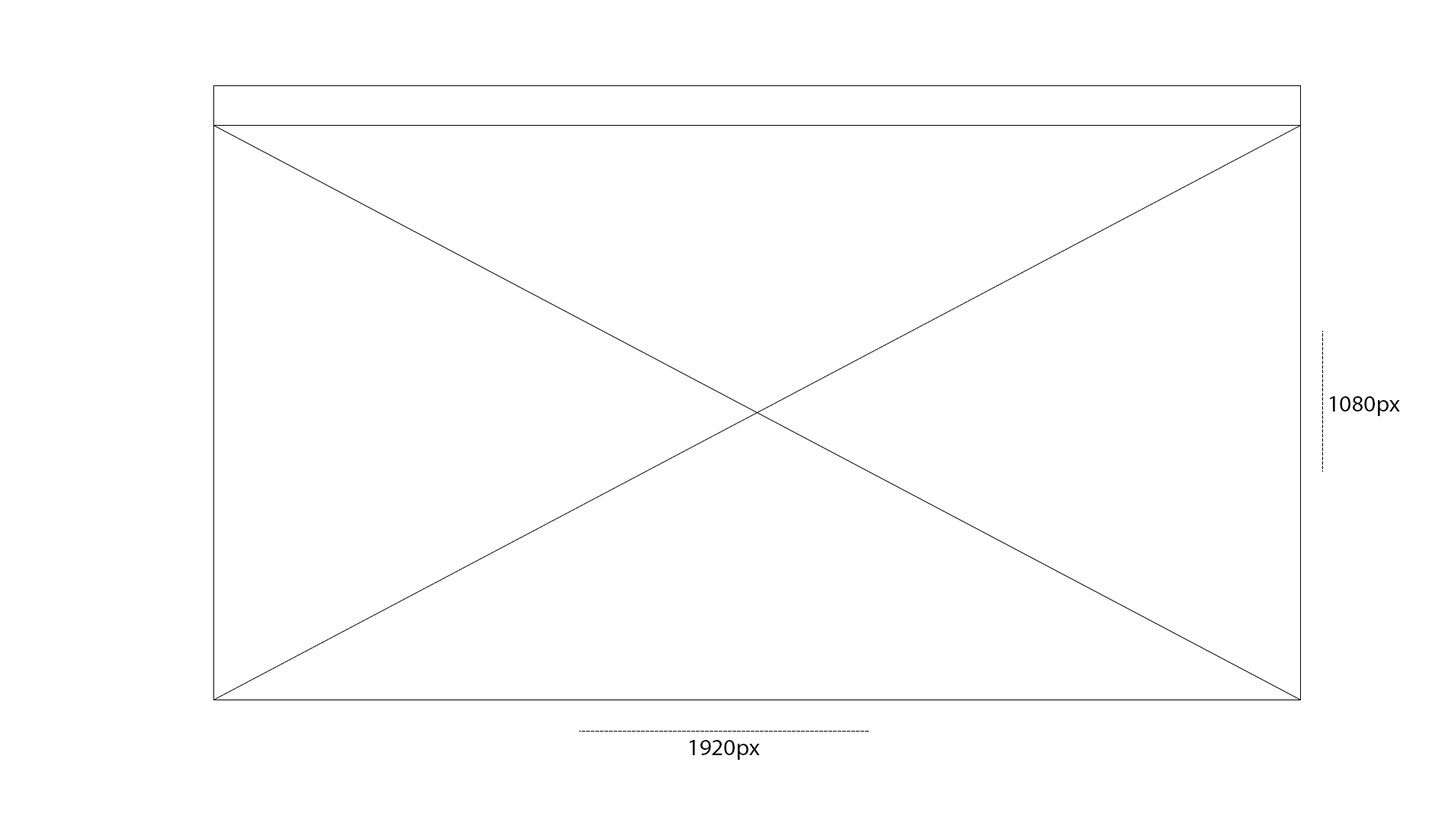
<style>
.page{position:relative;width:1448px;height:823px;background:#ffffff}
.page>*{position:absolute;margin:0}
.t1{font:22.9px "MyriadPro-Regular";color:#000000;scale:1.04 1}
</style>
<div class="page">
<p class="t1" style="left:1330px;top:396px;width:70px;height:20px">1080px</p>
<p class="t1" style="left:690px;top:740px;width:70px;height:20px">1920px</p>
</div>
